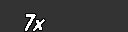
<style>
.page{position:relative;width:128px;height:32px;background:#333333}
.page>*{position:absolute;margin:0}
.t1{font:26px "DomDiagonalBT-Regular";color:#ffffff;scale:1.1 1}
</style>
<div class="page">
<p class="t1" style="left:25px;top:14px;width:20px;height:17px">7x</p>
</div>
